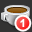
<style>
.page{position:relative;width:32px;height:32px;background:#333333}
.page>*{position:absolute;margin:0}
.t1{font:11px "Arial-BoldMT";color:#ffffff}
</style>
<div class="page">
<p class="t1" style="left:20px;top:19px;width:5px;height:8px">1</p>
</div>
